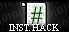
<style>
.page{position:relative;width:69px;height:32px}
.page>*{position:absolute;margin:0}
.t1{font:9px "TimesNewRomanPSMT";color:#ffffff}
</style>
<div class="page">
<p class="t1" style="left:9px;top:24px;width:50px;height:7px">INST. HACK</p>
</div>
